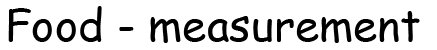
<style>
.page{position:relative;width:437px;height:50px;background:#ffffff}
.page>*{position:absolute;margin:0}
.t1{font:44.1px "ComicSansMS";color:#000000}
</style>
<div class="page">
<p class="t1" style="left:8px;top:6px;width:412px;height:37px">Food - measurement</p>
</div>
